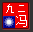
<style>
.page{position:relative;width:33px;height:32px;background:#f20000}
.page>*{position:absolute;margin:0}
.t1{font:10.4px "SimSun";color:#ffffff}
.t2{font:11.7px "SimSun";color:#ffffff}
</style>
<div class="page">
<p class="t1" style="left:6px;top:4px;width:19px;height:9px">九二</p>
<p class="t2" style="left:16px;top:15px;width:11px;height:12px">冯</p>
</div>
